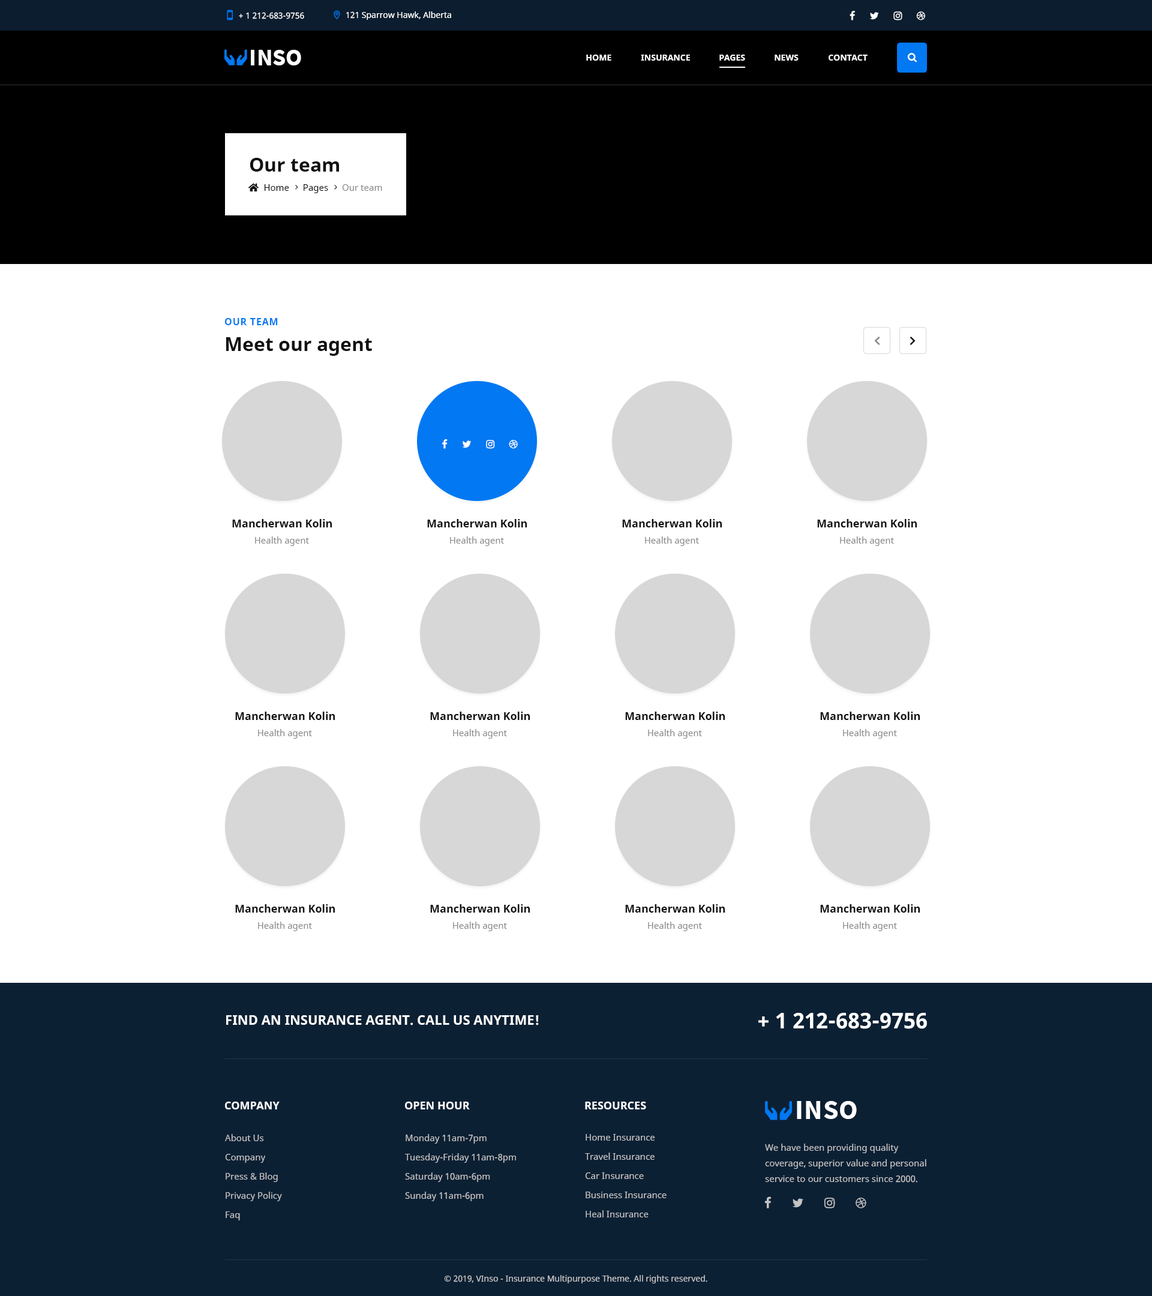
<style>
.page{position:relative;width:1152px;height:1296px;background:#ffffff}
.page>*{position:absolute;margin:0}
.t1{font:8.4px "NotoSans";color:#ffffff}
.t2{font:24px "SourceSansPro-Bold";color:#ffffff;text-transform:uppercase}
.t3{font:8.4px "NotoSans-Bold";color:#ffffff;text-transform:uppercase}
.t4{font:19.2px "NotoSans-Bold";color:#111111}
.t5{font:9.6px "NotoSans-Bold";letter-spacing:0.05em;color:#0278f2;text-transform:uppercase}
.t6{font:10.8px "NotoSans-Bold";color:#111111}
.t7{font:9px "NotoSans";color:#888888}
.t8{font:21.6px "NotoSans-Bold";color:#ffffff;text-transform:uppercase}
.t9{font:13.2px "NotoSans-Bold";color:#ffffff;text-transform:uppercase}
.t10{font:10.8px "NotoSans-Bold";color:#ffffff}
.t11{font:10.8px "NotoSans-Bold";color:#ffffff;text-transform:uppercase}
.t12{font:27.6px "SourceSansPro-Bold";letter-spacing:0.025em;color:#ffffff;text-transform:uppercase}
.t13{font:9px/19.2px "NotoSans";color:#c4c4c4}
.t14{font:9px/15.6px "NotoSans";color:#c4c4c4}
.t15{font:8.4px "NotoSans";color:#c4c4c4}
</style>
<div class="page">
<p class="t1" style="left:239px;top:12px;width:65px;height:7px">+ 1 212-683-9756</p>
<p class="t1" style="left:346px;top:11px;width:105px;height:9px">121 Sparrow Hawk, Alberta</p>
<p class="t2" style="left:251px;top:50px;width:50px;height:15px">inso</p>
<p class="t3" style="left:586px;top:55px;width:25px;height:6px">Home</p>
<p class="t3" style="left:641px;top:55px;width:49px;height:6px">Insurance</p>
<p class="t3" style="left:719px;top:55px;width:26px;height:6px">Pages</p>
<p class="t3" style="left:775px;top:55px;width:24px;height:6px">News</p>
<p class="t3" style="left:829px;top:55px;width:39px;height:6px">COntact</p>
<p class="t4" style="left:250px;top:158px;width:89px;height:14px">Our team</p>
<p class="t5" style="left:225px;top:318px;width:53px;height:7px">Our team</p>
<p class="t4" style="left:226px;top:337px;width:146px;height:19px">Meet our agent</p>
<p class="t6" style="left:232px;top:519px;width:100px;height:8px">Mancherwan Kolin</p>
<p class="t6" style="left:427px;top:519px;width:100px;height:8px">Mancherwan Kolin</p>
<p class="t6" style="left:622px;top:519px;width:100px;height:8px">Mancherwan Kolin</p>
<p class="t6" style="left:817px;top:519px;width:100px;height:8px">Mancherwan Kolin</p>
<p class="t7" style="left:255px;top:536px;width:54px;height:10px">Health agent</p>
<p class="t7" style="left:450px;top:536px;width:54px;height:10px">Health agent</p>
<p class="t7" style="left:645px;top:536px;width:54px;height:10px">Health agent</p>
<p class="t7" style="left:840px;top:536px;width:54px;height:10px">Health agent</p>
<p class="t6" style="left:235px;top:712px;width:100px;height:8px">Mancherwan Kolin</p>
<p class="t6" style="left:430px;top:712px;width:100px;height:8px">Mancherwan Kolin</p>
<p class="t6" style="left:625px;top:712px;width:100px;height:8px">Mancherwan Kolin</p>
<p class="t6" style="left:820px;top:712px;width:100px;height:8px">Mancherwan Kolin</p>
<p class="t7" style="left:258px;top:729px;width:54px;height:10px">Health agent</p>
<p class="t7" style="left:453px;top:729px;width:54px;height:10px">Health agent</p>
<p class="t7" style="left:648px;top:729px;width:54px;height:10px">Health agent</p>
<p class="t7" style="left:843px;top:729px;width:54px;height:10px">Health agent</p>
<p class="t6" style="left:235px;top:904px;width:100px;height:9px">Mancherwan Kolin</p>
<p class="t6" style="left:430px;top:904px;width:100px;height:9px">Mancherwan Kolin</p>
<p class="t6" style="left:625px;top:904px;width:100px;height:9px">Mancherwan Kolin</p>
<p class="t6" style="left:820px;top:904px;width:100px;height:9px">Mancherwan Kolin</p>
<p class="t7" style="left:258px;top:922px;width:54px;height:9px">Health agent</p>
<p class="t7" style="left:453px;top:922px;width:54px;height:9px">Health agent</p>
<p class="t7" style="left:648px;top:922px;width:54px;height:9px">Health agent</p>
<p class="t7" style="left:843px;top:922px;width:54px;height:9px">Health agent</p>
<p class="t8" style="left:758px;top:1013px;width:169px;height:16px">+ 1 212-683-9756</p>
<p class="t9" style="left:226px;top:1015px;width:313px;height:10px">Find an Insurance agent. Call us anytime!</p>
<p class="t10" style="left:225px;top:1102px;width:55px;height:7px">COMPANY</p>
<p class="t11" style="left:405px;top:1102px;width:65px;height:7px">Open hour</p>
<p class="t11" style="left:585px;top:1102px;width:61px;height:7px">RESOURCES</p>
<p class="t12" style="left:797px;top:1101px;width:60px;height:18px">Inso</p>
<p class="t13" style="left:225px;top:1134px;width:57px;height:86px">About Us<br>Company<br>Press &amp; Blog<br>Privacy Policy<br>Faq</p>
<p class="t13" style="left:405px;top:1134px;width:111px;height:67px">Monday 11am-7pm<br>Tuesday-Friday 11am-8pm<br>Saturday 10am-6pm<br>Sunday 11am-6pm</p>
<p class="t13" style="left:585px;top:1134px;width:82px;height:83px">Home Insurance<br>Travel Insurance<br>Car Insurance<br>Business Insurance<br>Heal Insurance</p>
<p class="t14" style="left:765px;top:1144px;width:161px;height:39px">We have been providing quality coverage, superior value and personal service to our customers since 2000.</p>
<p class="t15" style="left:444px;top:1275px;width:263px;height:8px">© 2019, VInso - Insurance Multipurpose Theme. All rights reserved.</p>
</div>
